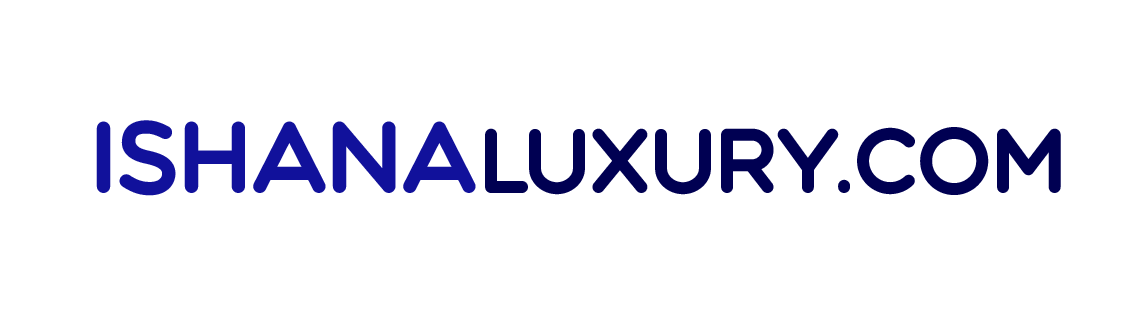
<style>
.page{position:relative;width:1140px;height:320px;background:#ffffff}
.page>*{position:absolute;margin:0}
.t1{font:72px "MulticoloreProRegular";color:#000052}
.t2{font:80px "MulticoloreProRegular";color:#11119b}
</style>
<div class="page">
<p class="t1" style="left:96px;top:120px;width:965px;height:76px"><span class="t2">iSHANA</span>LUXURY.COM</p>
</div>
